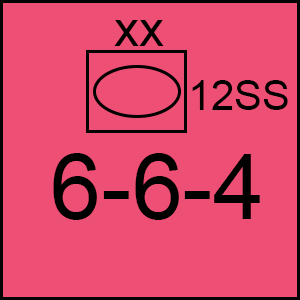
<style>
.page{position:relative;width:300px;height:300px;background:#ee4f74}
.page>*{position:absolute;margin:0}
.t1{font:50px "ArialMT";color:#000000}
.t2{font:41.7px "ArialMT";color:#000000}
.t3{font:91.7px "ArialMT";color:#000000}
</style>
<div class="page">
<p class="t1" style="left:114px;top:20px;width:50px;height:26px">xx</p>
<p class="t2" style="left:192px;top:80px;width:96px;height:30px">12SS</p>
<p class="t3" style="left:53px;top:153px;width:207px;height:67px">6-6-4</p>
</div>
